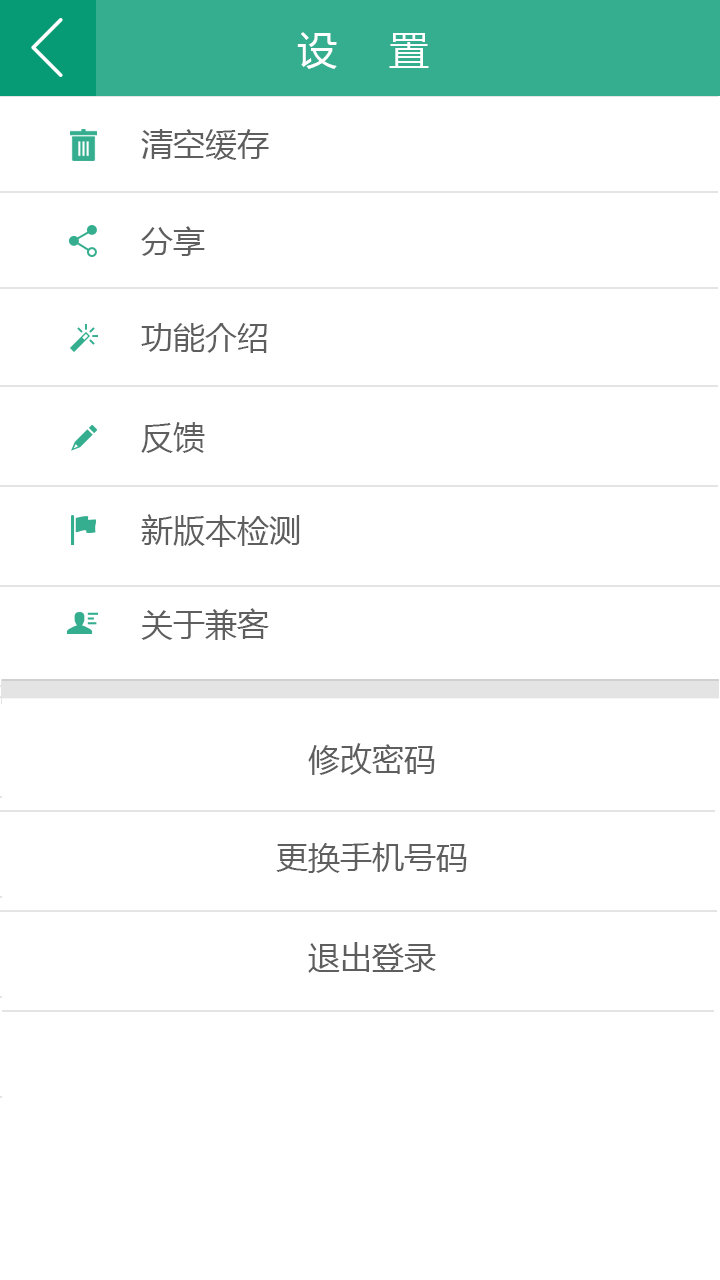
<style>
.page{position:relative;width:720px;height:1280px;background:#ffffff}
.page>*{position:absolute;margin:0}
.t1{font:40px "MicrosoftYaHei";letter-spacing:0.1em;color:#ffffff}
.t2{font:32px "MicrosoftYaHei";color:#5e5e5e}
</style>
<div class="page">
<p class="t1" style="left:297px;top:32px;width:132px;height:37px">设   置</p>
<p class="t2" style="left:141px;top:129px;width:128px;height:31px">清空缓存</p>
<p class="t2" style="left:141px;top:226px;width:64px;height:30px">分享</p>
<p class="t2" style="left:141px;top:323px;width:126px;height:30px">功能介绍</p>
<p class="t2" style="left:141px;top:422px;width:64px;height:31px">反馈</p>
<p class="t2" style="left:141px;top:514px;width:159px;height:33px">新版本检测</p>
<p class="t2" style="left:141px;top:608px;width:128px;height:32px">关于兼客</p>
<p class="t2" style="left:308px;top:743px;width:127px;height:32px">修改密码</p>
<p class="t2" style="left:276px;top:842px;width:191px;height:31px">更换手机号码</p>
<p class="t2" style="left:308px;top:942px;width:128px;height:31px">退出登录</p>
</div>
